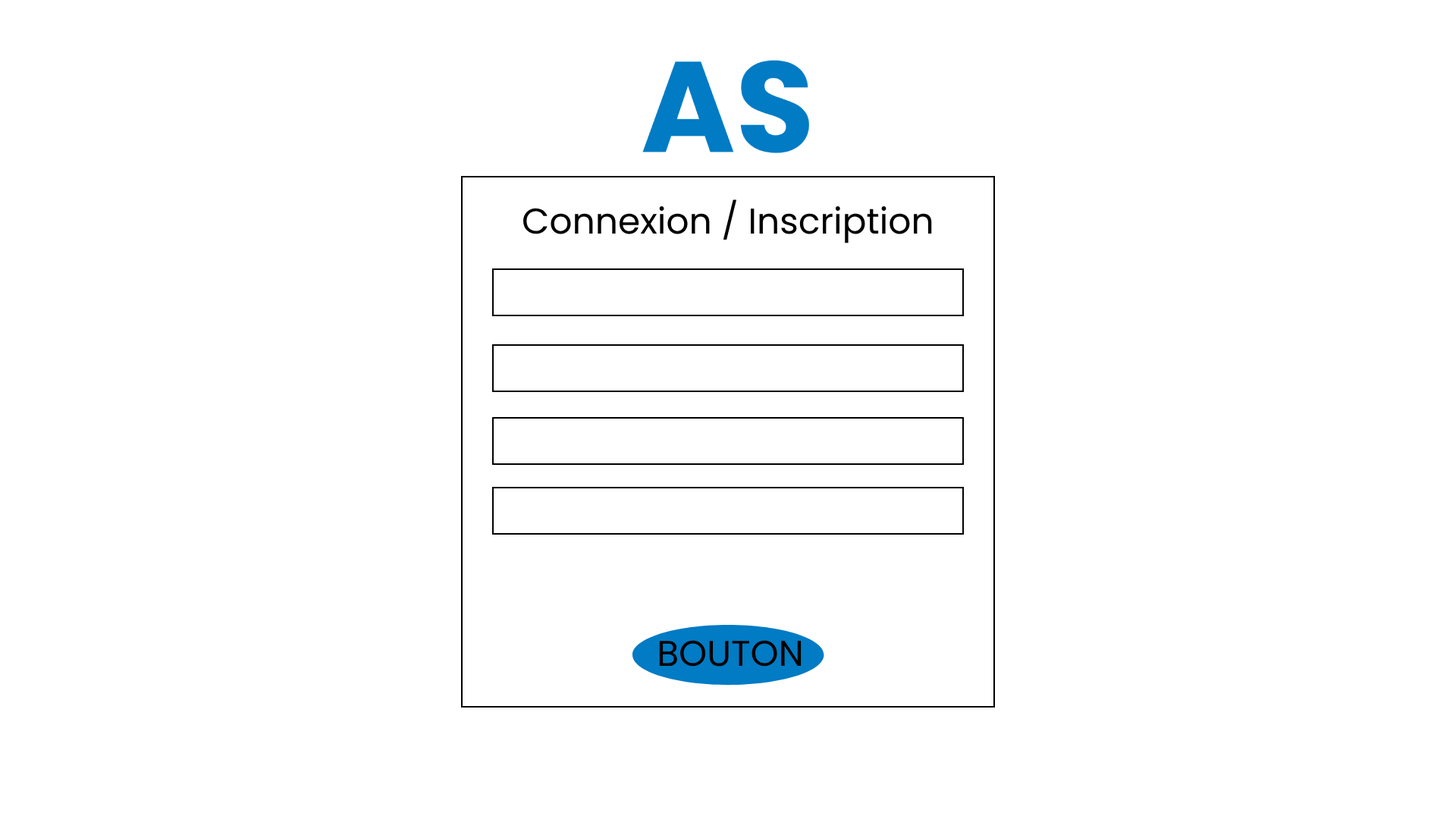
<style>
.page{position:relative;width:1456px;height:819px;background:#ffffff}
.page>*{position:absolute;margin:0}
.t1{font:35.8px "Poppins-Regular";color:#000000}
</style>
<div class="page">
<p class="t1" style="left:523px;top:199px;width:409px;height:44px">Connexion / Inscription</p>
<p class="t1" style="left:659px;top:640px;width:143px;height:27px">BOUTON</p>
</div>
